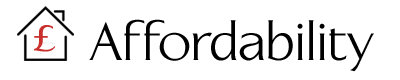
<style>
.page{position:relative;width:400px;height:80px;background:#ffffff}
.page>*{position:absolute;margin:0}
.t1{font:36px "LinotypeAperto-SemiBold";color:#c9302c}
.t2{font:54px "LinotypeAperto-Roman";color:#000000}
</style>
<div class="page">
<p class="t1" style="left:33px;top:25px;width:23px;height:27px">£</p>
<p class="t2" style="left:89px;top:19px;width:285px;height:53px">Affordability</p>
</div>
